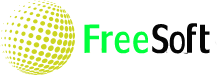
<style>
.page{position:relative;width:218px;height:75px;background:#ffffff}
.page>*{position:absolute;margin:0}
.t1{font:38.5px "Gaps";color:#00ff3c;scale:0.73 1}
.t2{font:38.5px "Gaps";color:#050505;scale:0.73 1}
</style>
<div class="page">
<p class="t1" style="left:84px;top:23px;width:126px;height:31px">Free<span class="t2">Soft</span></p>
</div>
